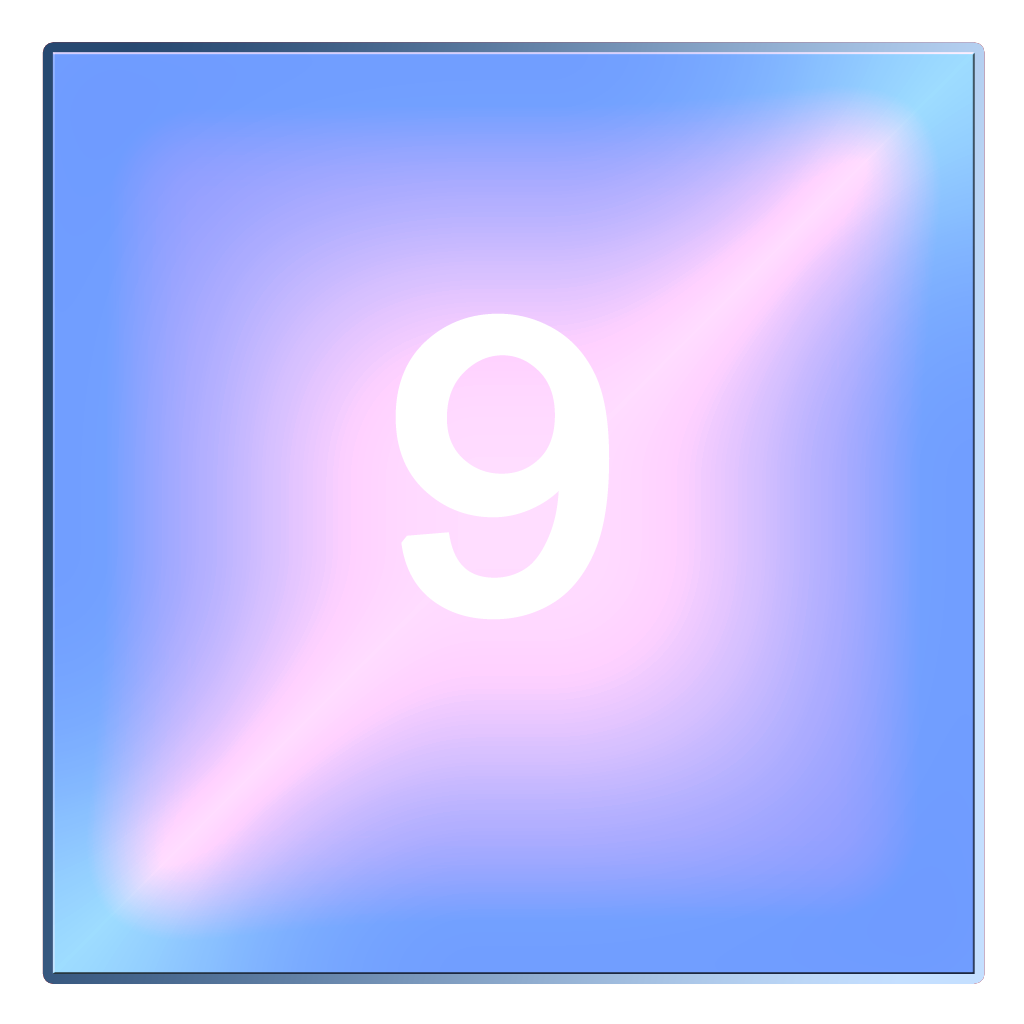
<style>
.page{position:relative;width:1024px;height:1024px}
.page>*{position:absolute;margin:0}
.t1{font:400px "ArialNarrow";color:#ffffff;font-weight:bold;scale:1.3 1}
</style>
<div class="page">
<p class="t1" style="left:395px;top:313px;width:215px;height:307px">9</p>
</div>
